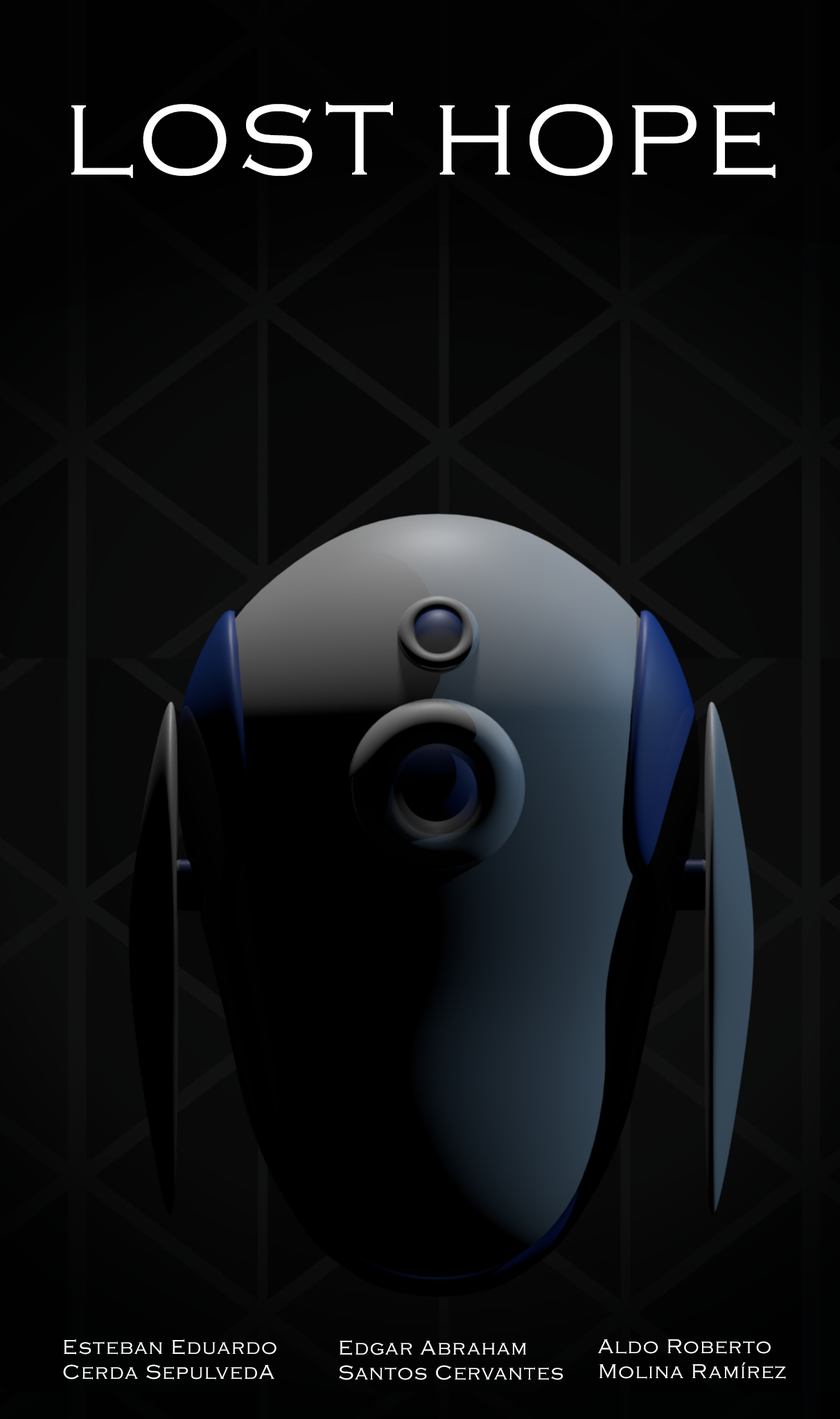
<style>
.page{position:relative;width:840px;height:1419px}
.page>*{position:absolute;margin:0}
.t1{font:104px "CopperplateGothic-Light";letter-spacing:0.06em;color:#ffffff}
.t2{font:20.8px "CopperplateGothic-Light";letter-spacing:0.06em;color:#ffffff}
</style>
<div class="page">
<p class="t1" style="left:71px;top:102px;width:705px;height:76px">LOST HOPE</p>
<p class="t2" style="left:63px;top:1340px;width:214px;height:40px">Esteban Eduardo <br>Cerda SepulvedA</p>
<p class="t2" style="left:339px;top:1340px;width:224px;height:41px">Edgar Abraham <br>Santos Cervantes</p>
<p class="t2" style="left:598px;top:1340px;width:188px;height:39px">Aldo Roberto <br>Molina Ramírez</p>
</div>
